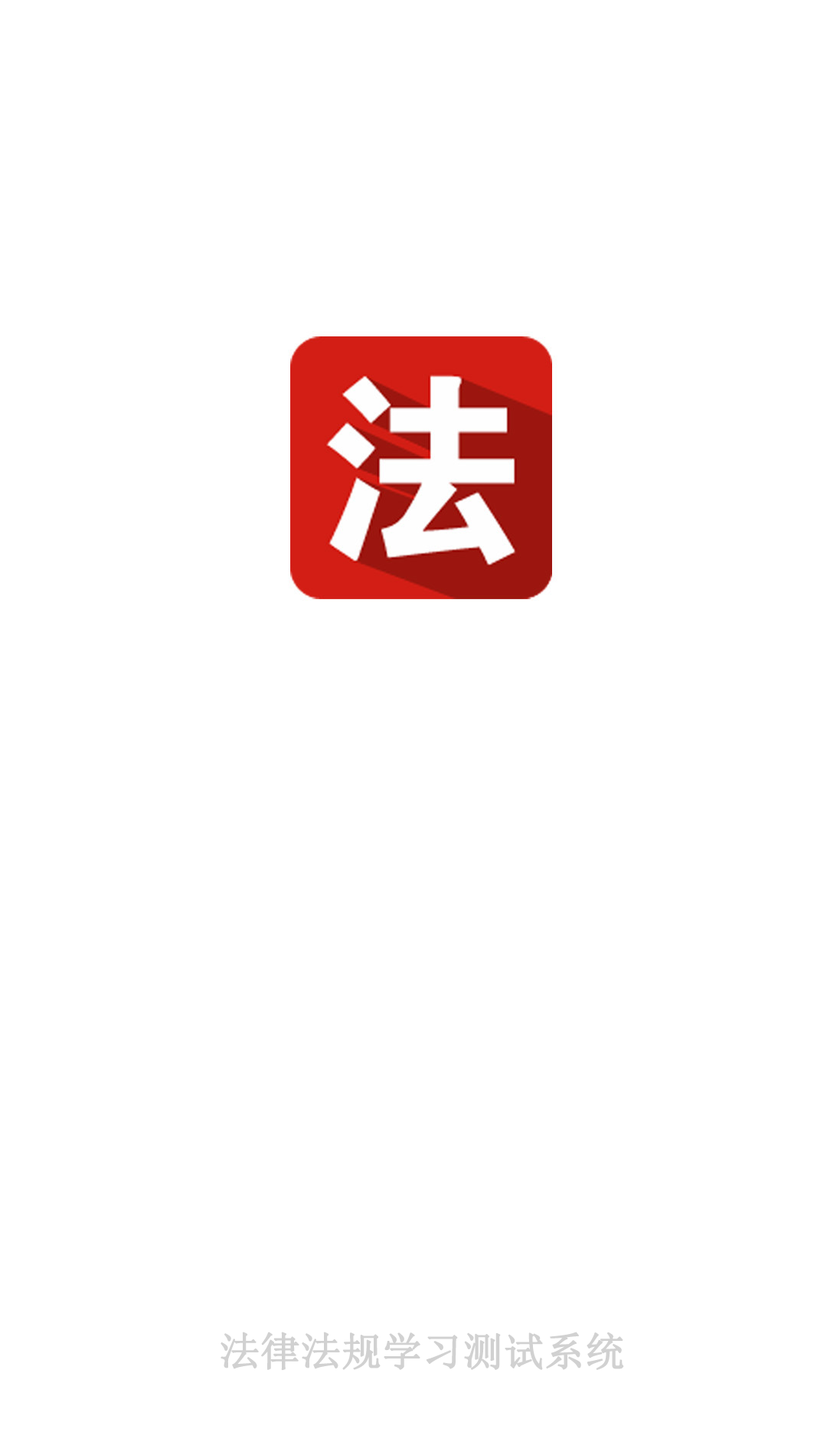
<style>
.page{position:relative;width:827px;height:1442px;background:#ffffff}
.page>*{position:absolute;margin:0}
.t1{font:39.8px "SimSun";color:#d1d1d1;font-weight:bold}
</style>
<div class="page">
<p class="t1" style="left:221px;top:1331px;width:403px;height:39px">法律法规学习测试系统</p>
</div>
